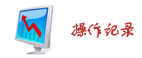
<style>
.page{position:relative;width:142px;height:58px;background:#ffffff}
.page>*{position:absolute;margin:0}
.t1{font:18px "FZSTK--GBK1-0";letter-spacing:-0.14em;color:#bd3a3a;font-weight:bold}
</style>
<div class="page">
<p class="t1" style="left:71px;top:22px;width:63px;height:16px">操作记录</p>
</div>
